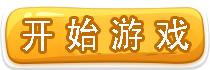
<style>
.page{position:relative;width:210px;height:70px}
.page>*{position:absolute;margin:0}
.t1{font:36px "AdobeHeitiStd-Regular";letter-spacing:0.05em;color:#fefefd;scale:0.95 1}
</style>
<div class="page">
<p class="t1" style="left:23px;top:18px;width:166px;height:33px">开 始 游 戏</p>
</div>
